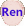
<style>
.page{position:relative;width:25px;height:26px}
.page>*{position:absolute;margin:0}
.t1{font:12px "LaoUI-Bold";color:#3e08d1}
</style>
<div class="page">
<p class="t1" style="left:2px;top:7px;width:21px;height:9px">Ren</p>
</div>
